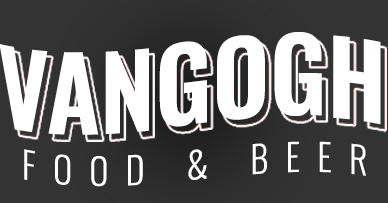
<style>
.page{position:relative;width:388px;height:203px;background:#ffffff}
.page>*{position:absolute;margin:0}
.t1{font:99.9px "Oswald-SemiBold";color:#ffffff}
.t2{font:36.1px "Oswald-Light";letter-spacing:0.48em;color:#ffffff}
</style>
<div class="page">
<p class="t1" style="left:0px;top:32px;width:381px;height:103px">VANGOGH</p>
<p class="t2" style="left:24px;top:141px;width:342px;height:46px">FOOD &amp; BEER</p>
</div>
